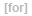
<style>
.page{position:relative;width:32px;height:16px;background:#ffffff}
.page>*{position:absolute;margin:0}
.t1{font:12px "Arial-BoldMT";color:#bbbbbb}
</style>
<div class="page">
<p class="t1" style="left:4px;top:3px;width:24px;height:11px">[for]</p>
</div>
